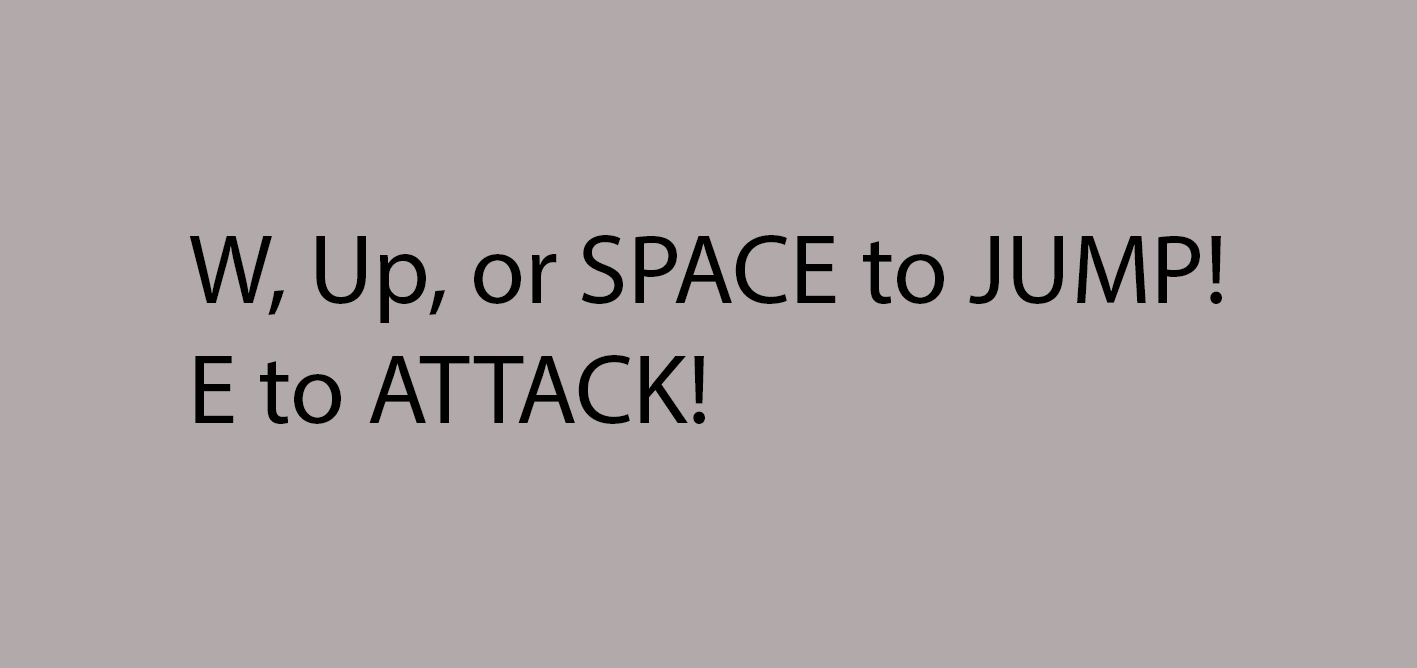
<style>
.page{position:relative;width:1417px;height:668px;background:#b2aaaa}
.page>*{position:absolute;margin:0}
.t1{font:100px "MyriadPro-Regular";color:#000000}
</style>
<div class="page">
<p class="t1" style="left:189px;top:235px;width:1033px;height:189px">W, Up, or SPACE to JUMP!<br>E to ATTACK!</p>
</div>
